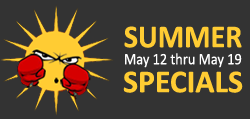
<style>
.page{position:relative;width:250px;height:119px;background:#333333}
.page>*{position:absolute;margin:0}
.t1{font:32.1px/45px "Calibri-Bold";color:#ffcc33;text-transform:uppercase}
.t2{font:32.1px/45px "Calibri-Bold";color:#ffcc33;text-transform:uppercase;scale:0.94 1}
.t3{font:16px "Calibri";color:#ffffff;scale:0.9 1}
</style>
<div class="page">
<p class="t1" style="left:123px;top:26px;width:120px;height:67px;text-align:center"><span class="t2">summer<br></span>specialS</p>
<p class="t3" style="left:125px;top:53px;width:117px;height:15px">May 12 thru May 19</p>
</div>
